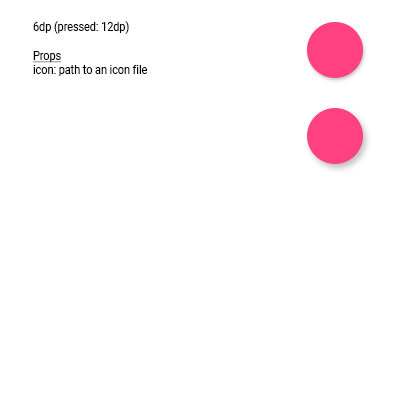
<style>
.page{position:relative;width:400px;height:400px;background:#ffffff}
.page>*{position:absolute;margin:0}
.t1{font:12px "Roboto-Regular";color:#000000;scale:0.9 1}
.t2{font:12px "Roboto-Regular";color:#000000;text-decoration:underline;scale:0.9 1}
</style>
<div class="page">
<p class="t1" style="left:33px;top:21px;width:115px;height:55px">6dp (pressed: 12dp)<br><br><span class="t2">Props<br></span>icon: path to an icon file</p>
</div>
